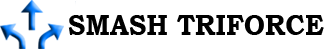
<style>
.page{position:relative;width:324px;height:52px;background:#ffffff}
.page>*{position:absolute;margin:0}
.t1{font:29.1px "BookmanOldStyle-Bold";color:#000000;scale:0.9 1}
</style>
<div class="page">
<p class="t1" style="left:68px;top:15px;width:256px;height:20px">SMASH TRIFORCE</p>
</div>
